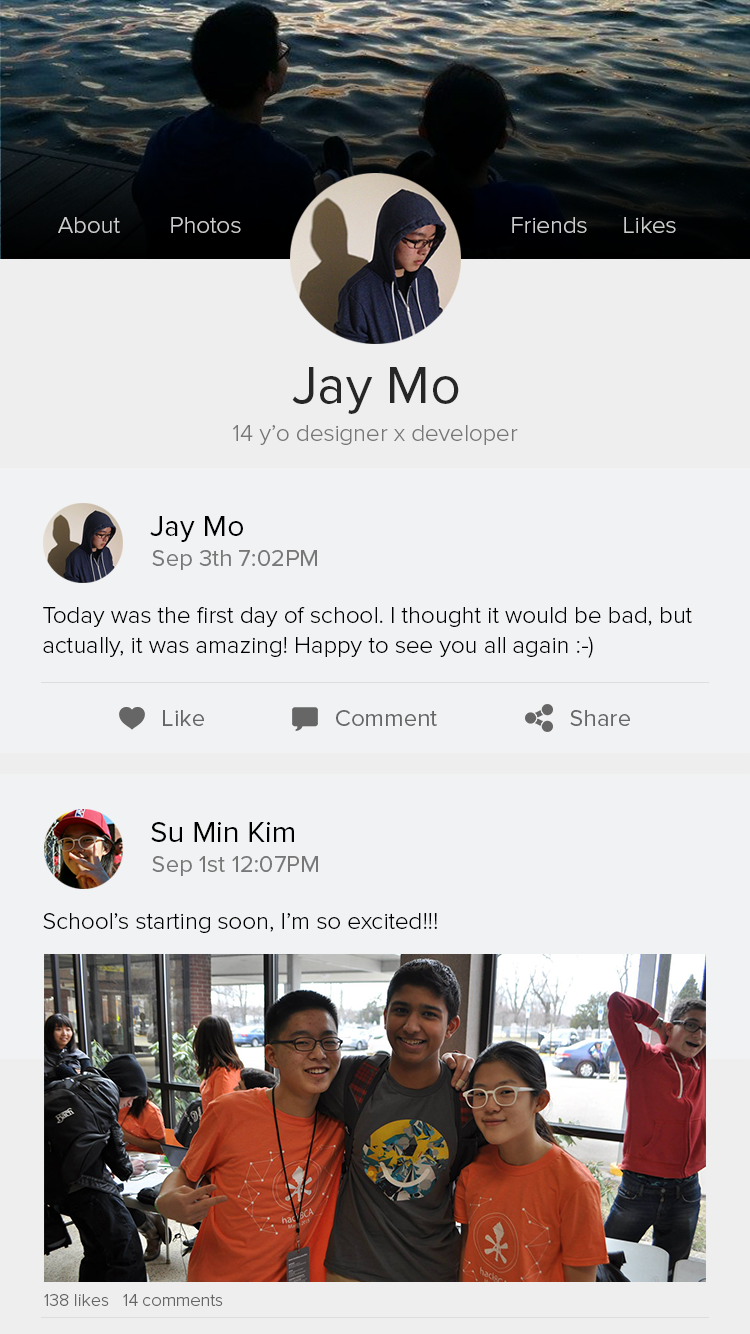
<style>
.page{position:relative;width:750px;height:1334px;background:#f1f2f3}
.page>*{position:absolute;margin:0}
.t1{font:24px "ProximaNova-Light";color:#cccccc}
.t2{font:54px "ProximaNova-Regular";color:#262626}
.t3{font:24px "ProximaNova-Light";color:#777777}
.t4{font:30px "ProximaNova-Regular";color:#000000}
.t5{font:24px "ProximaNova-Regular";color:#777777}
.t6{font:24px/30px "ProximaNova-Light";color:#000000}
.t7{font:24px "ProximaNova-Regular";color:#666666}
.t8{font:24px "ProximaNova-Light";color:#000000}
.t9{font:18px "ProximaNova-Light";color:#666666}
</style>
<div class="page">
<p class="t1" style="left:58px;top:217px;width:62px;height:16px">About</p>
<p class="t1" style="left:171px;top:217px;width:70px;height:16px">Photos</p>
<p class="t1" style="left:512px;top:217px;width:75px;height:16px">Friends</p>
<p class="t1" style="left:624px;top:217px;width:52px;height:16px">Likes</p>
<p class="t2" style="left:292px;top:367px;width:167px;height:47px">Jay Mo</p>
<p class="t3" style="left:233px;top:425px;width:285px;height:20px">14 y’o designer x developer</p>
<p class="t4" style="left:150px;top:516px;width:93px;height:26px">Jay Mo</p>
<p class="t5" style="left:152px;top:550px;width:165px;height:20px">Sep 3th 7:02PM</p>
<p class="t6" style="left:43px;top:607px;width:649px;height:51px">Today was the first day of school. I thought it would be bad, but<br>actually, it was amazing! Happy to see you all again :-)</p>
<p class="t7" style="left:163px;top:710px;width:41px;height:16px">Like</p>
<p class="t7" style="left:336px;top:710px;width:101px;height:16px">Comment</p>
<p class="t7" style="left:570px;top:710px;width:60px;height:16px">Share</p>
<p class="t4" style="left:151px;top:822px;width:143px;height:20px">Su Min Kim</p>
<p class="t5" style="left:152px;top:856px;width:166px;height:20px">Sep 1st 12:07PM</p>
<p class="t8" style="left:43px;top:913px;width:394px;height:20px">School’s starting soon, I’m so excited!!!</p>
<p class="t9" style="left:44px;top:1294px;width:65px;height:12px">138 likes</p>
<p class="t9" style="left:123px;top:1294px;width:100px;height:12px">14 comments</p>
</div>
